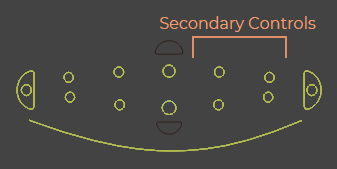
<style>
.page{position:relative;width:337px;height:169px;background:#434343}
.page>*{position:absolute;margin:0}
.t1{font:16px "Montserrat-Regular";color:#f59a6e}
</style>
<div class="page">
<p class="t1" style="left:160px;top:16px;width:156px;height:16px">Secondary Controls</p>
</div>
